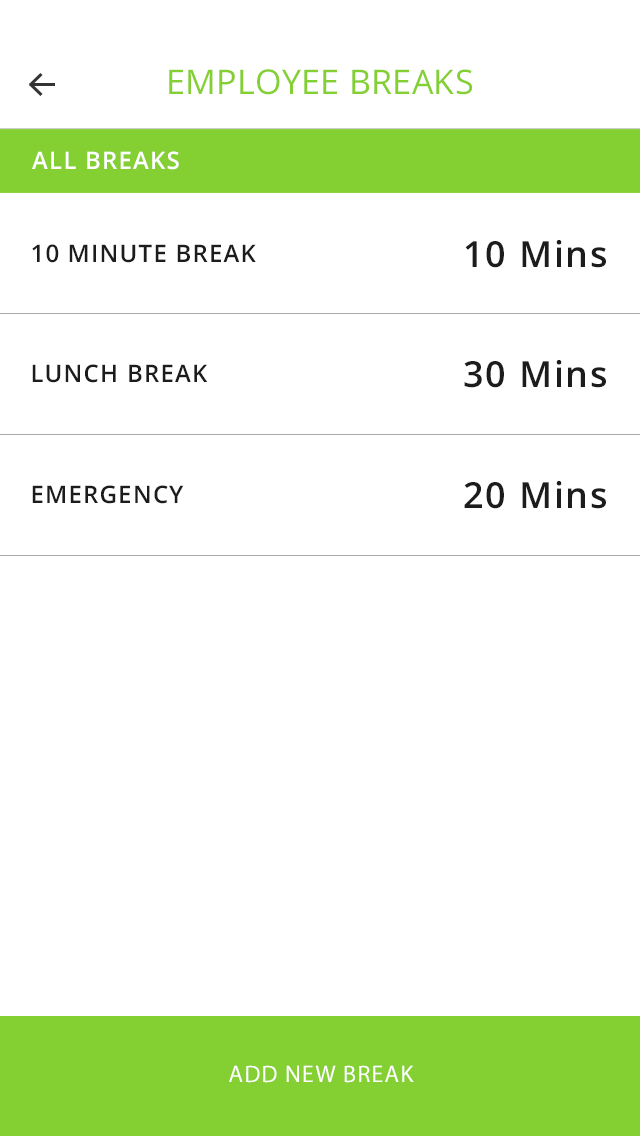
<style>
.page{position:relative;width:640px;height:1136px;background:#ffffff}
.page>*{position:absolute;margin:0}
.t1{font:34px "OpenSans";letter-spacing:0.01em;color:#84d033;text-transform:uppercase}
.t2{font:24px "OpenSans-Semibold";letter-spacing:0.05em;color:#ffffff;text-transform:uppercase}
.t3{font:24px "OpenSans-Semibold";letter-spacing:0.05em;color:#1c1c1c;text-transform:uppercase}
.t4{font:36px "OpenSans-Semibold";letter-spacing:0.05em;color:#1c1c1c}
.t5{font:24px "MyriadPro-Regular";letter-spacing:0.05em;color:#ffffff;text-transform:uppercase}
</style>
<div class="page">
<p class="t1" style="left:169px;top:69px;width:303px;height:26px">EMPLOYEE BREAKS</p>
<p class="t2" style="left:32px;top:151px;width:147px;height:19px">ALL BREAKS</p>
<p class="t3" style="left:32px;top:244px;width:224px;height:19px">10 MINUTE BREAK</p>
<p class="t4" style="left:465px;top:240px;width:141px;height:28px">10 Mins</p>
<p class="t3" style="left:32px;top:364px;width:176px;height:19px">LUNCH BREAK</p>
<p class="t4" style="left:464px;top:360px;width:142px;height:28px">30 Mins</p>
<p class="t3" style="left:32px;top:485px;width:152px;height:19px">EMERGENCY</p>
<p class="t4" style="left:464px;top:481px;width:142px;height:28px">20 Mins</p>
<p class="t5" style="left:229px;top:1065px;width:185px;height:18px">ADD NEW BREAK</p>
</div>
